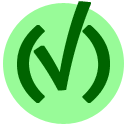
<style>
.page{position:relative;width:128px;height:128px;background:#98fb98}
.page>*{position:absolute;margin:0}
.t1{font:99.9px "DroidSansFallback";color:#006400;font-weight:bold}
.t2{font:83.3px "Consolas-Bold";color:#006400;font-weight:bold}
</style>
<div class="page">
<p class="t1" style="left:33px;top:1px;width:58px;height:90px;rotate:-6deg">✓</p>
<p class="t2" style="left:17px;top:25px;width:93px;height:78px">( )</p>
</div>
